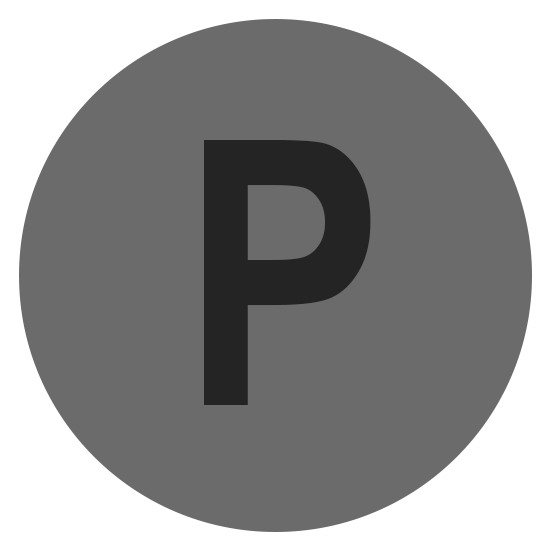
<style>
.page{position:relative;width:550px;height:550px;background:#6b6b6b}
.page>*{position:absolute;margin:0}
.t1{font:370px "ArialNarrow-Bold";color:#242424}
</style>
<div class="page">
<p class="t1" style="left:204px;top:140px;width:167px;height:265px">P</p>
</div>
